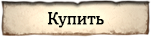
<style>
.page{position:relative;width:152px;height:40px}
.page>*{position:absolute;margin:0}
.t1{font:16px "CooperLightCBT";letter-spacing:0.03em;color:#000000;font-weight:bold}
</style>
<div class="page">
<p class="t1" style="left:47px;top:12px;width:57px;height:16px">Купить</p>
</div>
